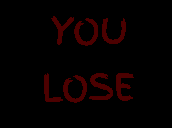
<style>
.page{position:relative;width:172px;height:128px;background:#000000}
.page>*{position:absolute;margin:0}
.t1{font:36px "FingerPaint-Regular";color:#4c0101}
</style>
<div class="page">
<p class="t1" style="left:51px;top:16px;width:75px;height:30px">YOU</p>
<p class="t1" style="left:44px;top:73px;width:90px;height:30px">LOSE</p>
</div>
